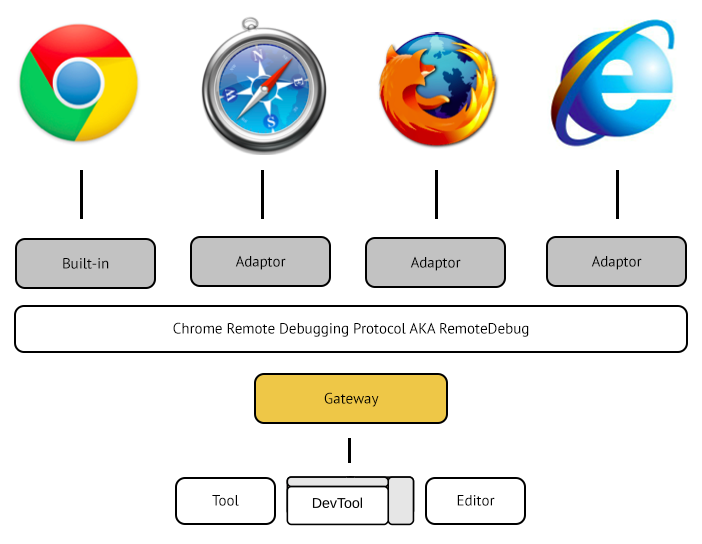
<style>
.page{position:relative;width:702px;height:544px;background:#ffffff}
.page>*{position:absolute;margin:0}
.t1{font:15px "PTSans-Regular";color:#000000}
</style>
<div class="page">
<p class="t1" style="left:235px;top:255px;width:51px;height:15px">Adaptor</p>
<p class="t1" style="left:410px;top:256px;width:51px;height:15px">Adaptor</p>
<p class="t1" style="left:591px;top:255px;width:51px;height:15px">Adaptor</p>
<p class="t1" style="left:63px;top:258px;width:46px;height:11px">Built-in</p>
<p class="t1" style="left:173px;top:322px;width:356px;height:15px">Chrome Remote Debugging Protocol AKA RemoteDebug</p>
<p class="t1" style="left:324px;top:392px;width:55px;height:15px">Gateway</p>
<p class="t1" style="left:212px;top:495px;width:27px;height:11px">Tool</p>
<p class="t1" style="left:457px;top:495px;width:38px;height:11px">Editor</p>
</div>
